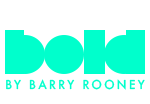
<style>
.page{position:relative;width:150px;height:104px;background:#ffffff}
.page>*{position:absolute;margin:0}
.t1{font:11.9px "Futura-Medium";letter-spacing:0.205em;color:#00ffcc;text-transform:uppercase;scale:0.97 1}
</style>
<div class="page">
<p class="t1" style="left:6px;top:79px;width:139px;height:11px">by barry rooney</p>
</div>
